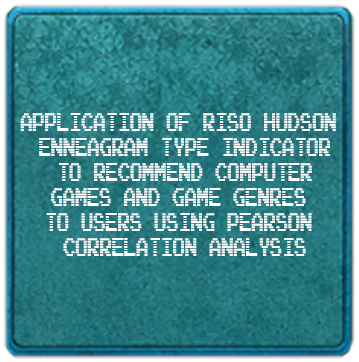
<style>
.page{position:relative;width:359px;height:362px}
.page>*{position:absolute;margin:0}
.t1{font:21.6px/25px "ArcadeInterlaced";letter-spacing:-0.04em;color:#ffffff;scale:0.6 1}
</style>
<div class="page">
<p class="t1" style="left:20px;top:113px;width:316px;height:143px;text-align:center">Application of Riso Hudson <br>Enneagram Type Indicator<br>to Recommend Computer<br>Games and Game Genres <br>to Users Using Pearson <br>Correlation Analysis</p>
</div>
